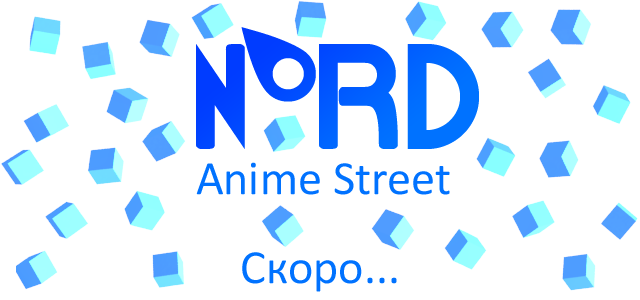
<style>
.page{position:relative;width:640px;height:300px;background:#ffffff}
.page>*{position:absolute;margin:0}
.t1{font:150px "NORDLogoFont"}
.t2{font:48px "Calibri";color:#0072ff}
</style>
<div class="page">
<p class="t1" style="left:196px;top:27px;width:283px;height:122px">NORD</p>
<p class="t2" style="left:196px;top:162px;width:254px;height:33px">Anime Street</p>
<p class="t2" style="left:242px;top:252px;width:155px;height:40px">Скоро...</p>
</div>
